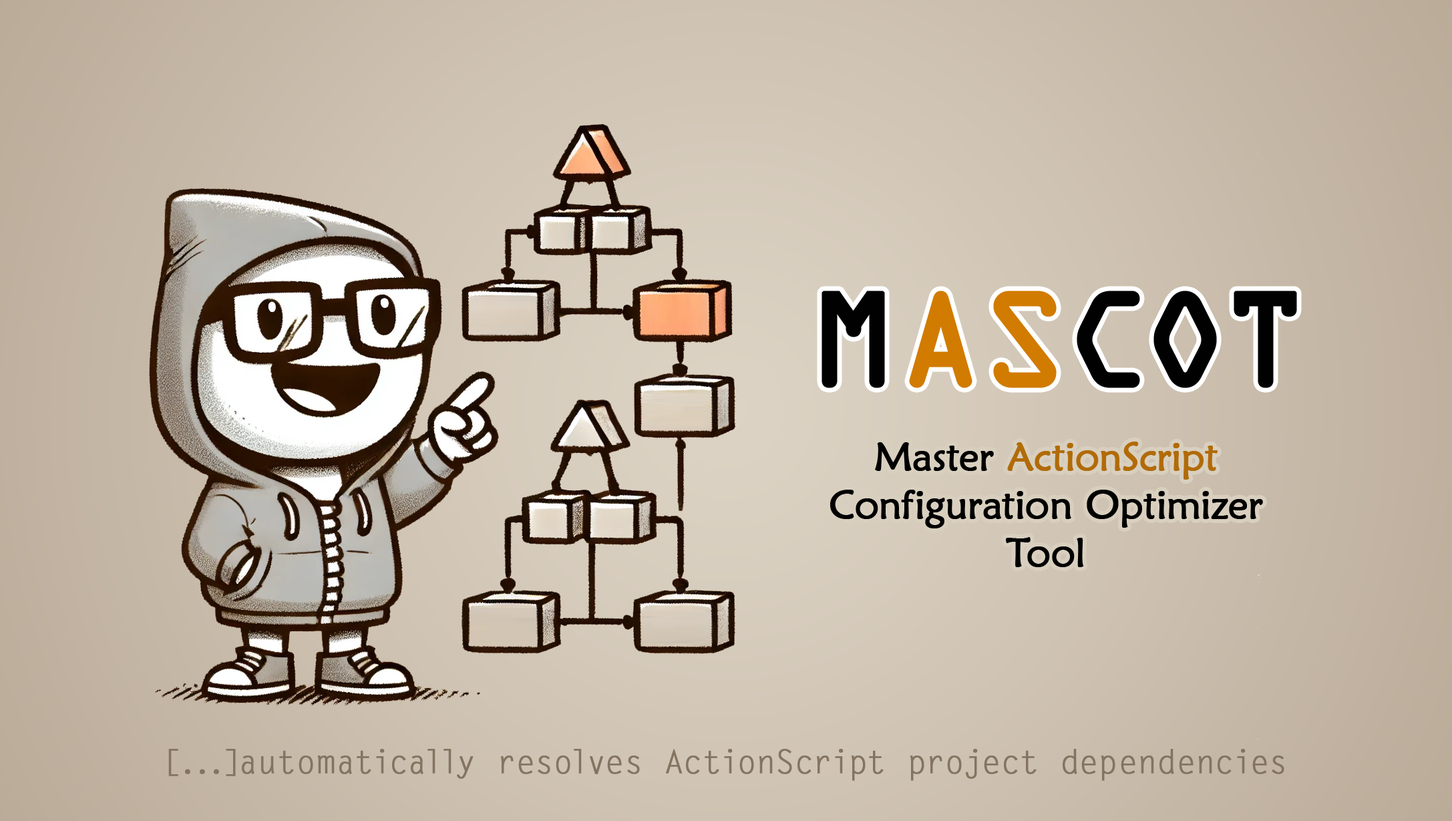
<style>
.page{position:relative;width:1452px;height:821px}
.page>*{position:absolute;margin:0}
.t1{font:120.2px "OCRAStd";color:#010101;font-weight:bold}
.t2{font:120.2px "OCRAStd";color:#d17b00;font-weight:bold}
.t3{font:40.1px "MaiandraGD-Regular";color:#000000;font-weight:bold}
.t4{font:40.1px "MaiandraGD-Regular";color:#b16b07;font-weight:bold}
.t5{font:32.1px "LetterGothicStd";color:#837461;font-weight:bold}
</style>
<div class="page">
<p class="t1" style="left:822px;top:291px;width:475px;height:97px">M<span class="t2">AS</span>COT</p>
<p class="t3" style="left:830px;top:442px;width:433px;height:125px;text-align:center">Master <span class="t4">ActionScript<br></span>Configuration Optimizer<br>Tool</p>
<p class="t5" style="left:168px;top:749px;width:1117px;height:32px">[...]automatically resolves ActionScript project dependencies</p>
</div>
